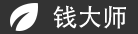
<style>
.page{position:relative;width:138px;height:34px;background:#333333}
.page>*{position:absolute;margin:0}
.t1{font:25px "AdobeHeitiStd-Regular";color:#ffffff}
</style>
<div class="page">
<p class="t1" style="left:53px;top:5px;width:73px;height:24px">钱大师</p>
</div>
